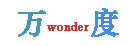
<style>
.page{position:relative;width:137px;height:46px;background:#ffffff}
.page>*{position:absolute;margin:0}
.t1{font:12px "TimesNewRomanPSMT";letter-spacing:0.01em;color:#da2d2d;font-weight:bold}
.t2{font:30px "STZhongsong";letter-spacing:0.01em;color:#4197c4;font-weight:bold}
.t3{font:30px "STZhongsong";letter-spacing:0.01em;color:#408bf1;font-weight:bold}
</style>
<div class="page">
<p class="t1" style="left:18px;top:8px;width:101px;height:29px"><span class="t2">万</span>wonder<span class="t3">度</span></p>
</div>
